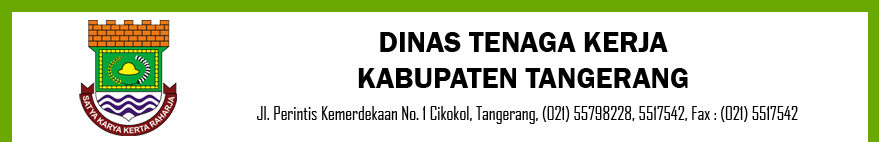
<style>
.page{position:relative;width:879px;height:142px;background:#ffffff}
.page>*{position:absolute;margin:0}
.t1{font:30px "FranklinGothic-Demi";color:#000000}
.t2{font:18px "AgencyFB-Reg";color:#000000}
</style>
<div class="page">
<p class="t1" style="left:358px;top:32px;width:330px;height:56px;text-align:center">DINAS TENAGA KERJA<br>KABUPATEN TANGERANG</p>
<p class="t2" style="left:257px;top:106px;width:541px;height:18px">Jl. Perintis Kemerdekaan No. 1 Cikokol, Tangerang, (021) 55798228, 5517542, Fax : (021) 5517542</p>
</div>
